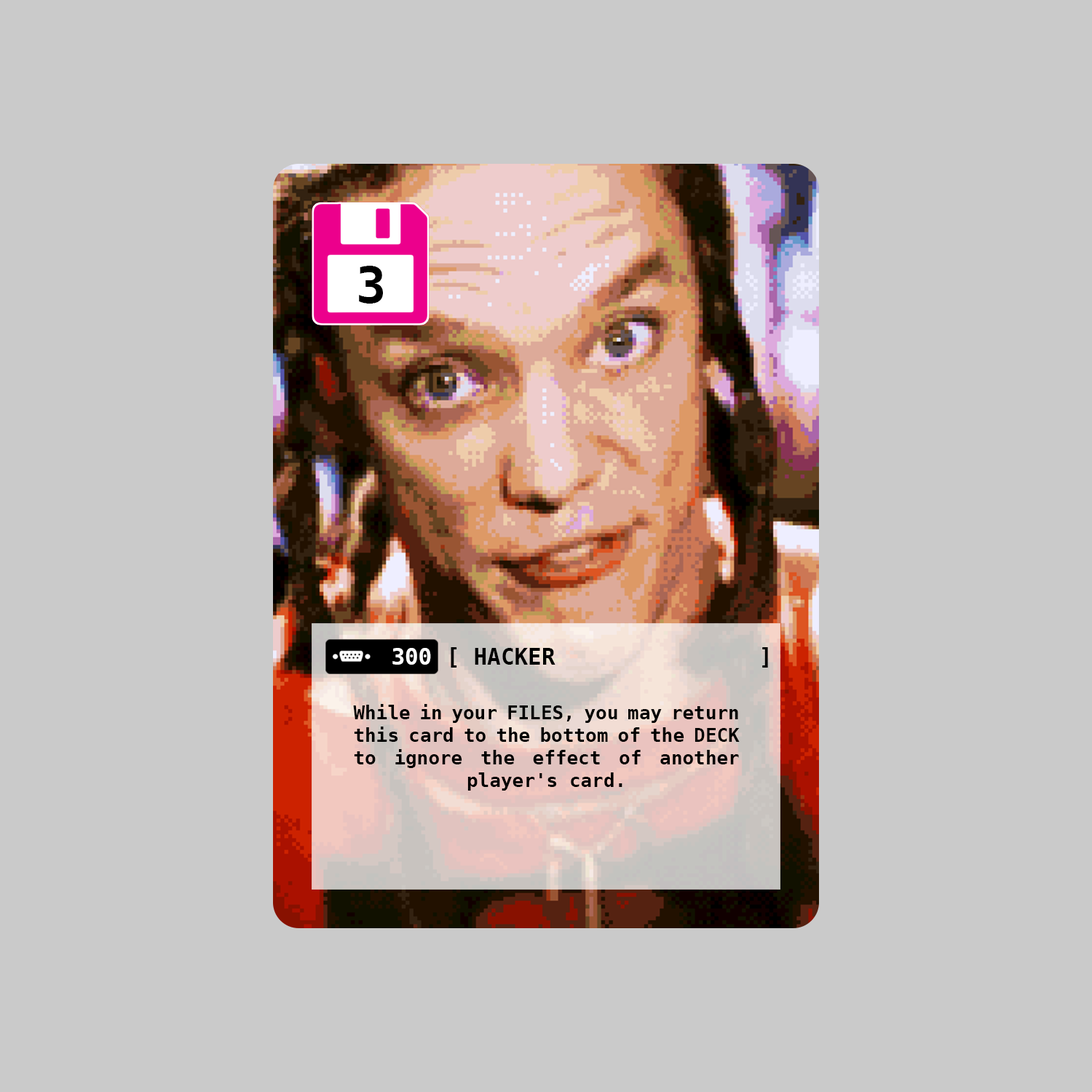
<style>
.page{position:relative;width:1092px;height:1092px;background:#cacaca}
.page>*{position:absolute;margin:0}
.t1{font:50.2px "DejaVuSansMono-Bold";color:#000000}
.t2{font:22.6px "DejaVuSansMono-Bold";color:#ffffff}
.t3{font:22.6px "DejaVuSansMono-Bold";color:#000000}
.t4{font:18.9px "DejaVuSansMono-Bold";color:#000000}
</style>
<div class="page">
<p class="t1" style="left:359px;top:266px;width:24px;height:38px">3</p>
<p class="t2" style="left:392px;top:648px;width:39px;height:17px">300</p>
<p class="t3" style="left:451px;top:647px;width:317px;height:21px">[                      ]</p>
<p class="t3" style="left:475px;top:648px;width:80px;height:17px">HACKER</p>
<p class="t4" style="left:353px;top:704px;width:387px;height:87px;text-align:justify">While in your FILES, you may return this card to the bottom of the DECK to ignore the effect of another player's card.</p>
</div>
